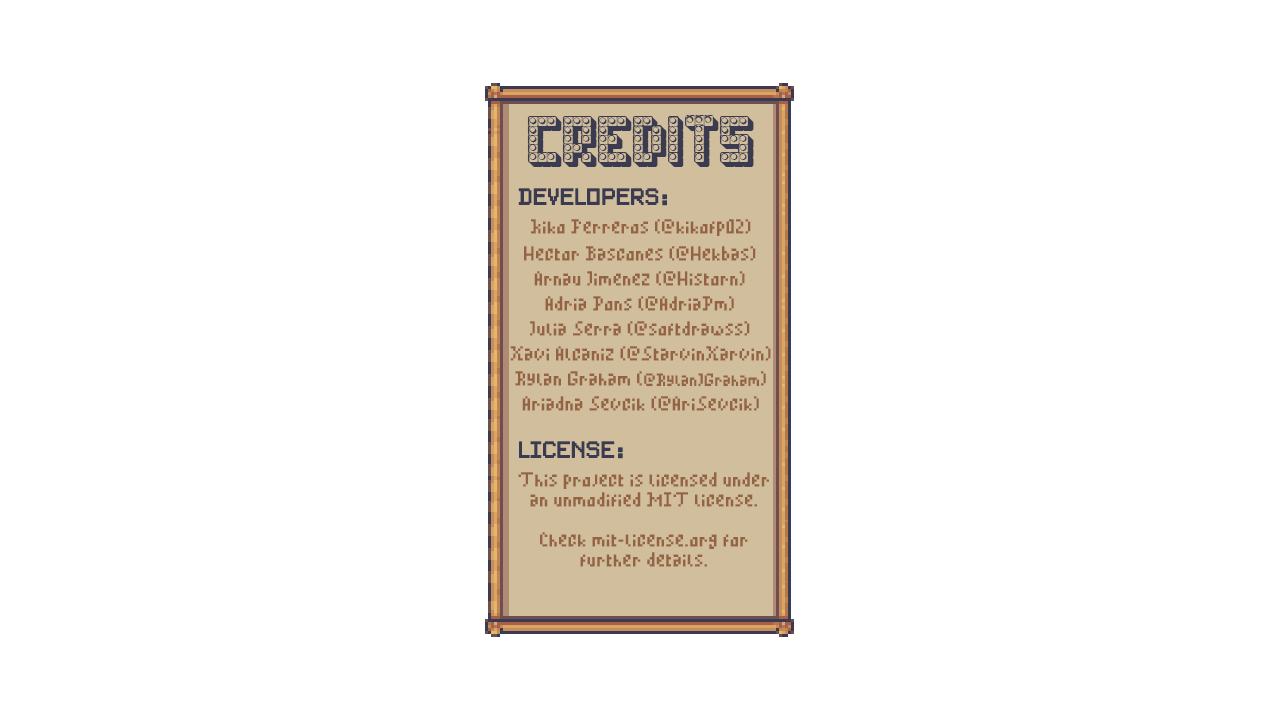
<style>
.page{position:relative;width:1280px;height:720px;background:#ffffff}
.page>*{position:absolute;margin:0}
.t1{font:66.7px "Toys-Regular";color:#3a3a50}
.t2{font:21.3px "PixelSplitter-Bold";color:#3a3a50}
.t3{font:16.7px "MinimalPixel2";color:#946344}
.t4{font:14.6px "MinimalPixel2";color:#946344}
</style>
<div class="page">
<p class="t1" style="left:527px;top:115px;width:227px;height:52px">CREDITS</p>
<p class="t2" style="left:518px;top:188px;width:149px;height:18px">DEVELOPERS:</p>
<p class="t3" style="left:531px;top:219px;width:220px;height:17px">Kiko Ferreros (@kikofp02)</p>
<p class="t3" style="left:524px;top:246px;width:232px;height:15px">Hector Bascones (@Hekbas)</p>
<p class="t3" style="left:534px;top:271px;width:211px;height:15px">Arnau Jimenez (@Historn)</p>
<p class="t3" style="left:545px;top:296px;width:189px;height:15px">Adria Pons (@AdriaPm)</p>
<p class="t3" style="left:530px;top:321px;width:220px;height:15px">Julia Serra (@softdrawss)</p>
<p class="t3" style="left:510px;top:346px;width:261px;height:15px">Xavi Alcaniz (@StarvinXarvin)</p>
<p class="t3" style="left:515px;top:371px;width:251px;height:16px">Rylan Graham (<span class="t4">@RylanJGraham</span>)</p>
<p class="t3" style="left:522px;top:396px;width:237px;height:15px">Ariadna Sevcik (@AriSevcik)</p>
<p class="t2" style="left:519px;top:441px;width:104px;height:18px">License:</p>
<p class="t3" style="left:518px;top:472px;width:251px;height:95px;text-align:center">This project is licensed under an unmodified MIT license.<br><br>Check mit-license.org for further details.</p>
</div>
